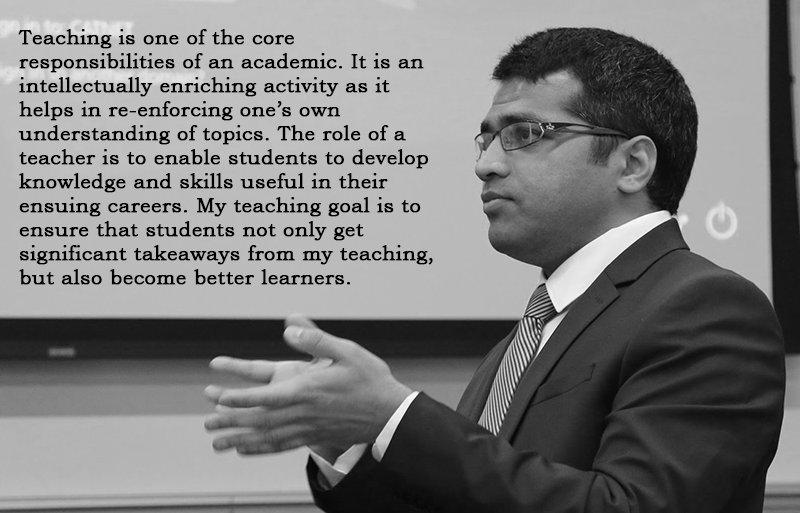
<style>
.page{position:relative;width:800px;height:513px}
.page>*{position:absolute;margin:0}
.t1{font:20px "BookmanOldStyle";color:#000000;font-weight:bold}
</style>
<div class="page">
<p class="t1" style="left:18px;top:29px;width:415px;height:256px">Teaching is one of the core responsibilities of an academic. It is an intellectually enriching activity as it helps in re-enforcing one’s own understanding of topics. The role of a teacher is to enable students to develop knowledge and skills useful in their ensuing careers. My teaching goal is to ensure that students not only get significant takeaways from my teaching, but also become better learners.</p>
</div>
